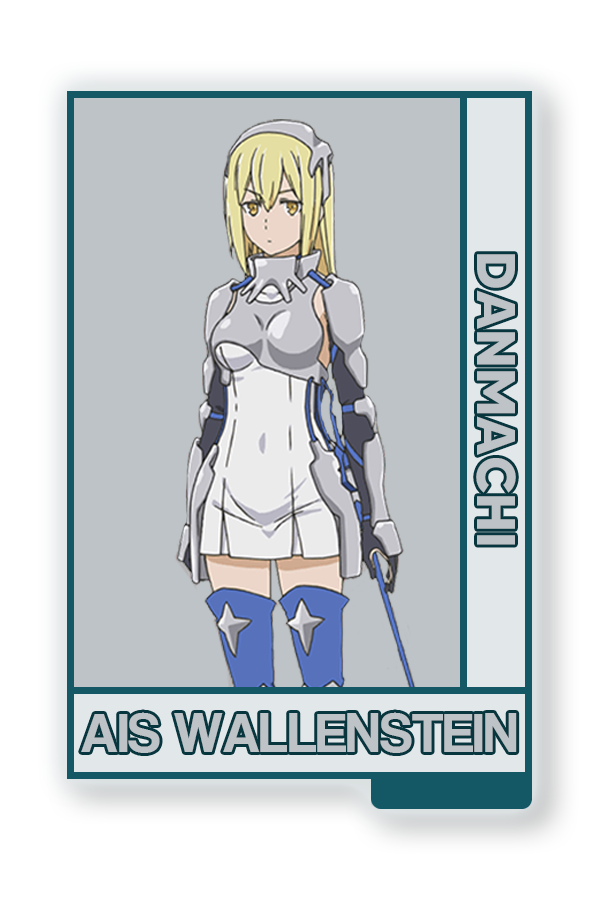
<style>
.page{position:relative;width:600px;height:900px;background:#bdc3c6}
.page>*{position:absolute;margin:0}
.t1{font:54.4px "MADETOMMY-Bold";color:#bdc3c6}
.t2{font:56.7px "CoolveticaRg-Regular";color:#bdc3c6}
</style>
<div class="page">
<p class="t1" style="left:476px;top:254px;width:40px;height:291px;rotate:90deg">DANMACHI</p>
<p class="t2" style="left:81px;top:712px;width:436px;height:41px">AIS WALLENSTEIN</p>
</div>
